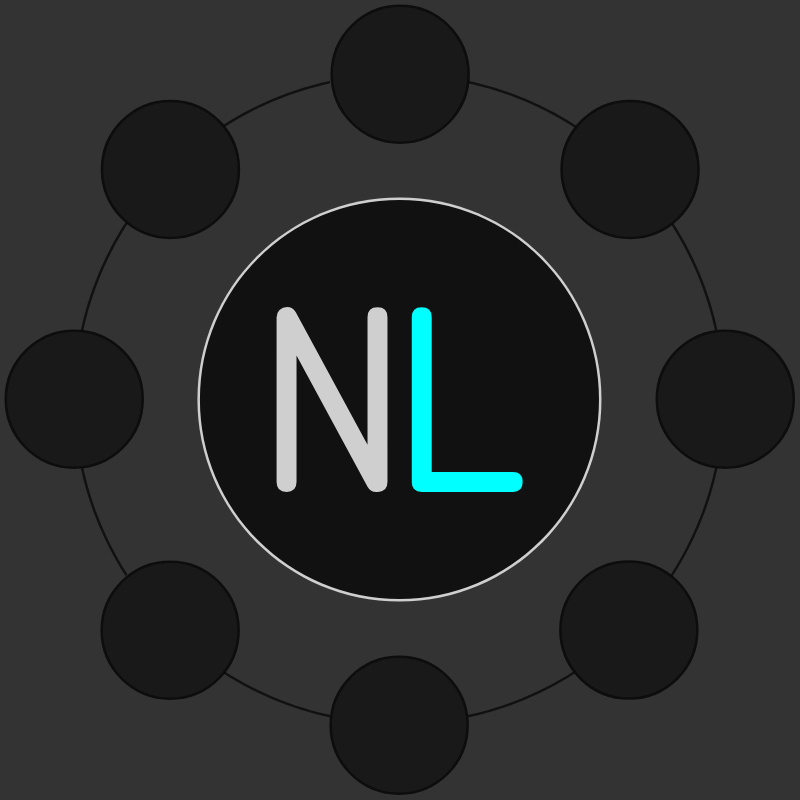
<style>
.page{position:relative;width:800px;height:800px;background:#333333}
.page>*{position:absolute;margin:0}
.t1{font:243.2px "RenderingJNL";color:#cfcfcf}
.t2{font:243.2px "RenderingJNL";color:#00ffff}
</style>
<div class="page">
<p class="t1" style="left:276px;top:306px;width:247px;height:188px">N<span class="t2">L</span></p>
</div>
